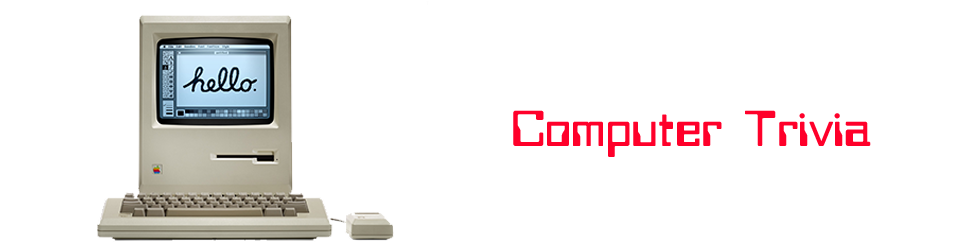
<style>
.page{position:relative;width:970px;height:250px;background:#ffffff}
.page>*{position:absolute;margin:0}
.t1{font:12px "bitwise";color:#ff002a}
</style>
<div class="page">
<p class="t1" style="left:513px;top:110px;width:358px;height:47px">Computer Trivia</p>
</div>
